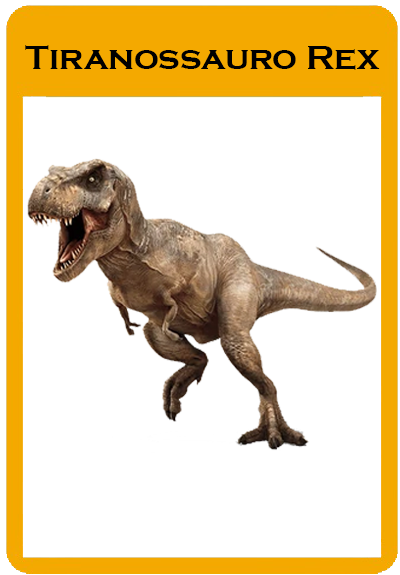
<style>
.page{position:relative;width:400px;height:575px;background:#ffffff}
.page>*{position:absolute;margin:0}
.t1{font:34.7px "CopperplateGothic-Bold";color:#000000}
</style>
<div class="page">
<p class="t1" style="left:25px;top:45px;width:355px;height:25px">Tiranossauro Rex</p>
</div>
